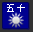
<style>
.page{position:relative;width:33px;height:32px;background:#000090}
.page>*{position:absolute;margin:0}
.t1{font:10.4px "SimSun";color:#ffffff}
</style>
<div class="page">
<p class="t1" style="left:7px;top:4px;width:18px;height:8px">五十</p>
</div>
